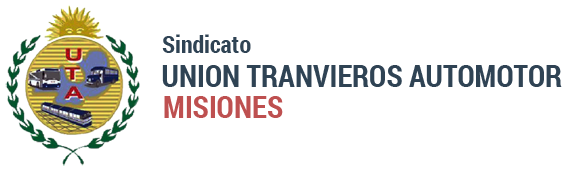
<style>
.page{position:relative;width:567px;height:169px;background:#ffffff}
.page>*{position:absolute;margin:0}
.t1{font:24px "RobotoCondensed-Bold";color:#2f4354}
.t2{font:30px "RobotoCondensed-Bold";color:#2f4354}
.t3{font:30px "RobotoCondensed-Bold";color:#be5050}
</style>
<div class="page">
<p class="t1" style="left:162px;top:34px;width:89px;height:19px">Sindicato</p>
<p class="t2" style="left:162px;top:65px;width:400px;height:22px">UNION TRANVIEROS AUTOMOTOR</p>
<p class="t3" style="left:164px;top:96px;width:119px;height:22px">MISIONES</p>
</div>
